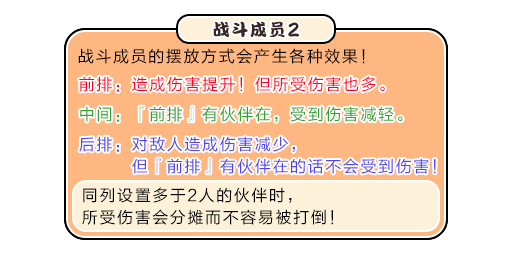
<style>
.page{position:relative;width:512px;height:256px;background:#ffffff}
.page>*{position:absolute;margin:0}
.t1{font:17px "DFPKanTingLiuW9";letter-spacing:0.1em;color:#3b2626}
.t2{font:20.4px "DFPKanTingLiuW9";letter-spacing:0.1em;color:#3b2626;scale:0.83 1}
.t3{font:16px "FZLTHJW--GB1-0";letter-spacing:0.1em;color:#000000}
.t4{font:16px "FZLTHJW--GB1-0";letter-spacing:0.1em;color:#ff002a}
.t5{font:16px "FZLTHJW--GB1-0";letter-spacing:0.1em;color:#38a02f}
.t6{font:16px/22px "FZLTHJW--GB1-0";letter-spacing:0.1em;color:#5444ed}
.t7{font:16px/22px "FZLTHJW--GB1-0";letter-spacing:0.1em;color:#000000}
</style>
<div class="page">
<p class="t1" style="left:213px;top:21px;width:86px;height:17px">战斗成员<span class="t2">2</span></p>
<p class="t3" style="left:78px;top:48px;width:287px;height:16px">战斗成员的摆放方式会产生各种效果！</p>
<p class="t4" style="left:79px;top:76px;width:306px;height:16px">前排：造成伤害提升！但所受伤害也多。</p>
<p class="t5" style="left:80px;top:106px;width:323px;height:16px">中间：『前排』有伙伴在，受到伤害减轻。</p>
<p class="t6" style="left:79px;top:136px;width:357px;height:38px">后排：对敌人造成伤害减少，<br>　　　但『前排』有伙伴在的话不会受到伤害！</p>
<p class="t7" style="left:82px;top:187px;width:252px;height:38px">同列设置多于2人的伙伴时，<br>所受伤害会分摊而不容易被打倒！</p>
</div>
